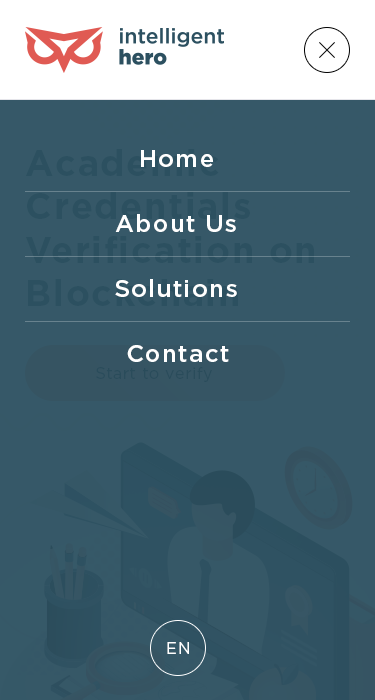
<style>
.page{position:relative;width:375px;height:700px;background:#365868}
.page>*{position:absolute;margin:0}
.t1{font:24px "GothamPro-Medium";letter-spacing:0.05em;color:#ffffff}
.t2{font:16px "GothamPro";letter-spacing:0.05em;color:#2a4c5b}
.t3{font:16px "GothamPro";letter-spacing:0.05em;color:#ffffff}
</style>
<div class="page">
<p class="t1" style="left:141px;top:150px;width:72px;height:17px">Home</p>
<p class="t1" style="left:115px;top:214px;width:121px;height:18px">About Us</p>
<p class="t1" style="left:115px;top:279px;width:122px;height:18px">Solutions</p>
<p class="t1" style="left:127px;top:345px;width:102px;height:17px">Contact</p>
<p class="t2" style="left:96px;top:367px;width:116px;height:15px">Start to verify</p>
<p class="t3" style="left:167px;top:642px;width:22px;height:12px">EN</p>
</div>
